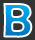
<style>
.page{position:relative;width:35px;height:40px;background:#333333}
.page>*{position:absolute;margin:0}
.t1{font:50px "BerlinSansFBDemi-Bold";letter-spacing:0.2em}
</style>
<div class="page">
<p class="t1" style="left:3px;top:3px;width:30px;height:35px">B</p>
</div>
